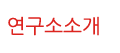
<style>
.page{position:relative;width:120px;height:53px;background:#ffffff}
.page>*{position:absolute;margin:0}
.t1{font:19.9px "NanumGothic";color:#dc241f}
</style>
<div class="page">
<p class="t1" style="left:8px;top:16px;width:91px;height:20px">연구소소개</p>
</div>
